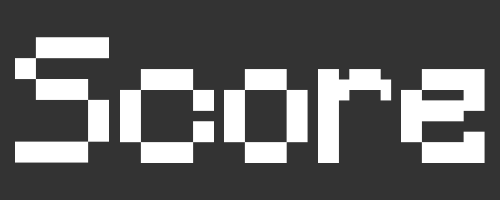
<style>
.page{position:relative;width:500px;height:200px;background:#333333}
.page>*{position:absolute;margin:0}
.t1{font:166.7px "Minecraft";color:#ffffff}
</style>
<div class="page">
<p class="t1" style="left:15px;top:37px;width:470px;height:126px">Score</p>
</div>
